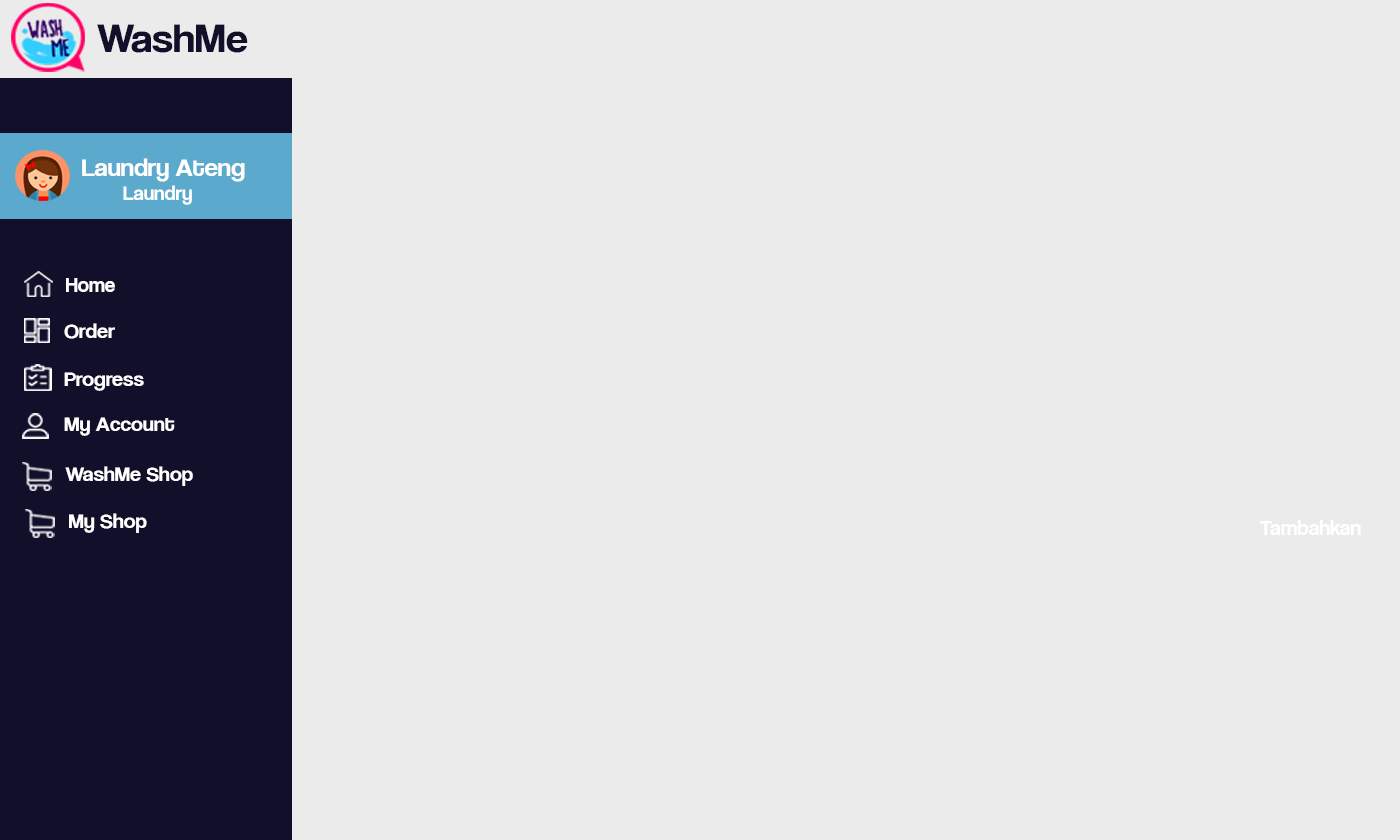
<style>
.page{position:relative;width:1400px;height:840px;background:#ebebeb}
.page>*{position:absolute;margin:0}
.t1{font:42.1px "CoolveticaRg-Regular";color:#120f2b;scale:1.05 1}
.t2{font:25.2px "CoolveticaRg-Regular";color:#ffffff;scale:1.05 1}
.t3{font:20px "CoolveticaRg-Regular";color:#ffffff;scale:1.05 1}
.t4{font:21px "CoolveticaRg-Regular";color:#ffffff}
.t5{font:21px "CoolveticaRg-Regular";color:#ffffff;scale:1.05 1}
.t6{font:22.2px "CoolveticaRg-Regular";color:#ffffff}
</style>
<div class="page">
<p class="t1" style="left:97px;top:24px;width:151px;height:29px">WashMe</p>
<p class="t2" style="left:82px;top:158px;width:163px;height:47px">Laundry Ateng<br><span class="t3">        Laundry</span></p>
<p class="t4" style="left:66px;top:278px;width:49px;height:14px">Home</p>
<p class="t5" style="left:64px;top:323px;width:51px;height:16px">Order</p>
<p class="t5" style="left:64px;top:372px;width:80px;height:19px">Progress</p>
<p class="t5" style="left:64px;top:417px;width:111px;height:19px">My Account</p>
<p class="t5" style="left:65px;top:466px;width:128px;height:20px">WashMe Shop</p>
<p class="t5" style="left:69px;top:513px;width:78px;height:20px">My Shop</p>
<p class="t6" style="left:1259px;top:520px;width:102px;height:15px">Tambahkan</p>
</div>
